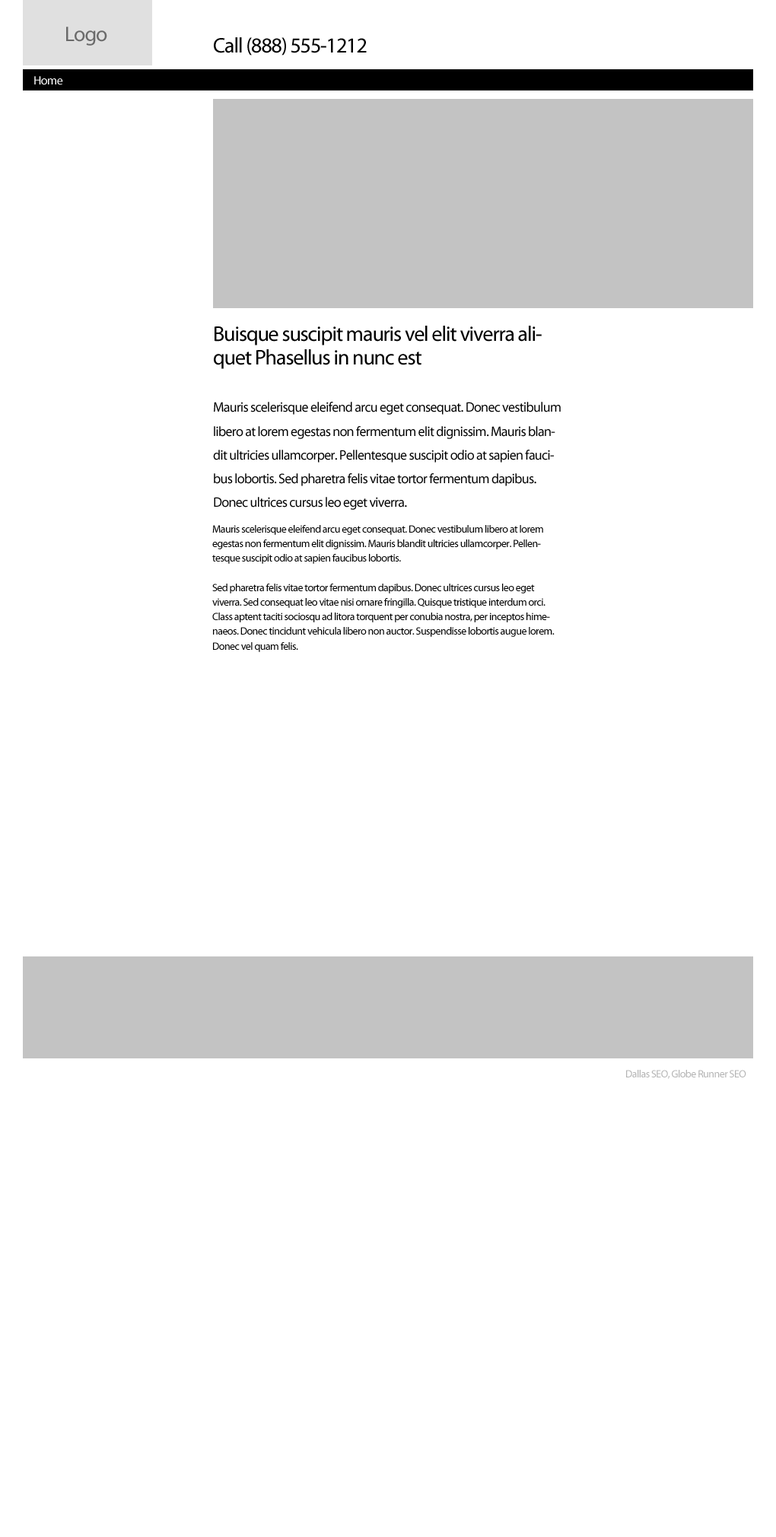
<style>
.page{position:relative;width:776px;height:1537px;background:#ffffff}
.page>*{position:absolute;margin:0}
.t1{font:21.3px "MyriadPro-Regular";letter-spacing:-0.04em;color:#6a6a6a}
.t2{font:21.3px "MyriadPro-Regular";letter-spacing:-0.04em;color:#000000}
.t3{font:12.2px "MyriadPro-Regular";letter-spacing:-0.04em;color:#ffffff}
.t4{font:13.7px/23.7px "MyriadPro-Regular";letter-spacing:-0.04em;color:#000000}
.t5{font:21.3px/23.7px "MyriadPro-Regular";letter-spacing:-0.04em;color:#000000}
.t6{font:10.7px/14.6px "MyriadPro-Regular";letter-spacing:-0.04em;color:#000000}
.t7{font:10.7px "MyriadPro-Regular";letter-spacing:-0.04em;color:#b4b4b4}
</style>
<div class="page">
<p class="t1" style="left:66px;top:27px;width:41px;height:19px">Logo</p>
<p class="t2" style="left:214px;top:37px;width:153px;height:19px">Call (888) 555-1212</p>
<p class="t3" style="left:34px;top:76px;width:29px;height:9px">Home</p>
<p class="t4" style="left:213px;top:326px;width:348px;height:184px"><span class="t5">Buisque suscipit mauris vel elit viverra aliquet Phasellus in nunc est<br></span><br>Mauris scelerisque eleifend arcu eget consequat. Donec vestibulum libero at lorem egestas non fermentum elit dignissim. Mauris blandit ultricies ullamcorper. Pellentesque suscipit odio at sapien faucibus lobortis. Sed pharetra felis vitae tortor fermentum dapibus. Donec ultrices cursus leo eget viverra.</p>
<p class="t6" style="left:212px;top:525px;width:343px;height:127px">Mauris scelerisque eleifend arcu eget consequat. Donec vestibulum libero at lorem egestas non fermentum elit dignissim. Mauris blandit ultricies ullamcorper. Pellentesque suscipit odio at sapien faucibus lobortis. <br><br>Sed pharetra felis vitae tortor fermentum dapibus. Donec ultrices cursus leo eget viverra. Sed consequat leo vitae nisi ornare fringilla. Quisque tristique interdum orci. Class aptent taciti sociosqu ad litora torquent per conubia nostra, per inceptos himenaeos. Donec tincidunt vehicula libero non auctor. Suspendisse lobortis augue lorem. Donec vel quam felis.</p>
<p class="t7" style="left:626px;top:1070px;width:120px;height:9px">Dallas SEO, Globe Runner SEO</p>
</div>
